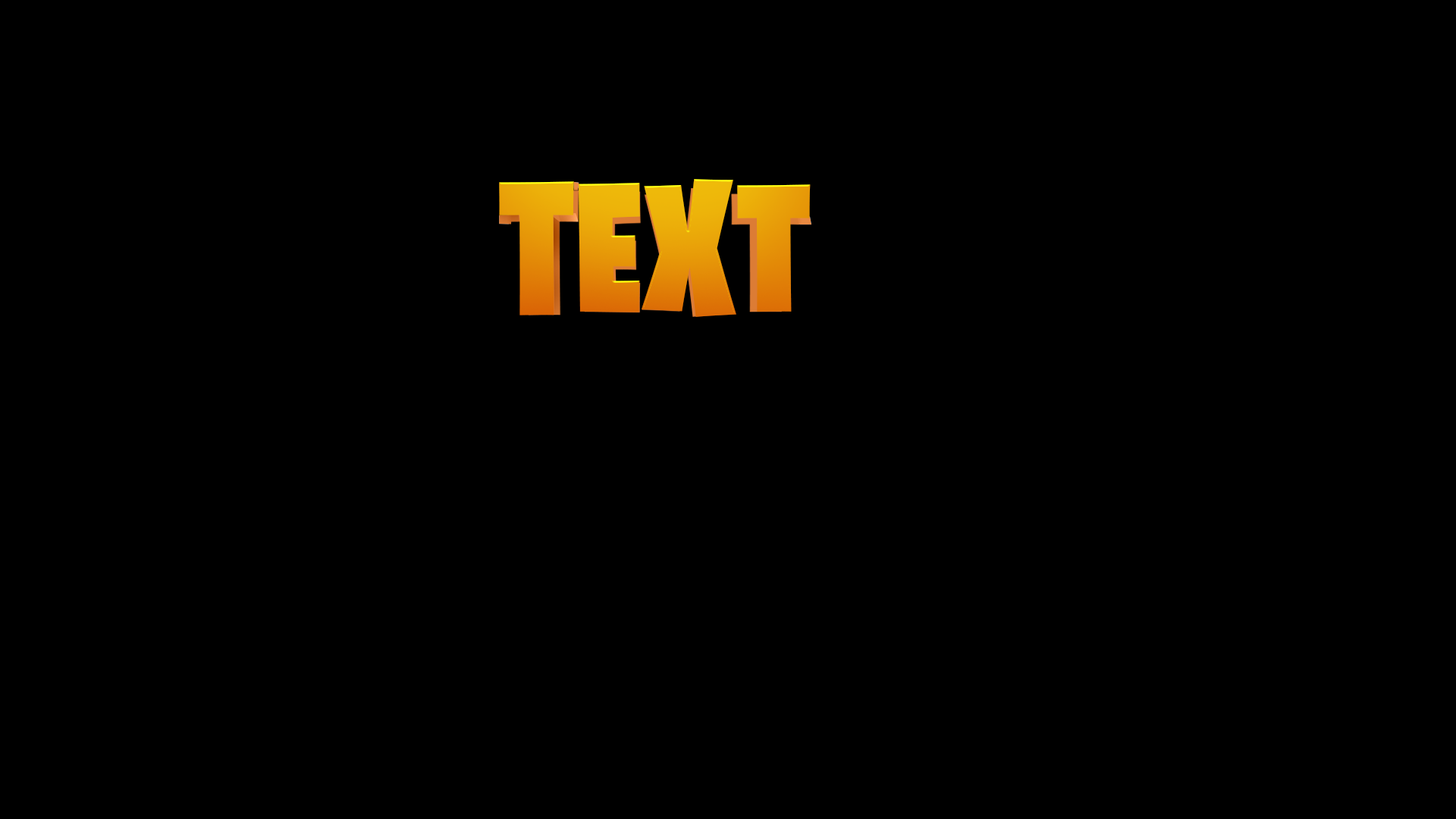
<style>
.page{position:relative;width:1456px;height:819px;background:#000000}
.page>*{position:absolute;margin:0}
.t1{font:189.6px "BurbankBigCondensed-Black";text-transform:uppercase}
</style>
<div class="page">
<p class="t1" style="left:499px;top:179px;width:312px;height:138px">text</p>
</div>
